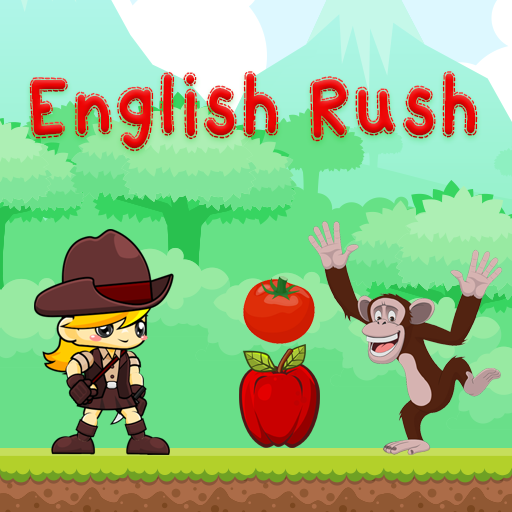
<style>
.page{position:relative;width:512px;height:512px}
.page>*{position:absolute;margin:0}
.t1{font:79px "KBAStitchInTime";color:#ed0404;scale:0.86 1}
</style>
<div class="page">
<p class="t1" style="left:29px;top:71px;width:449px;height:81px">English Rush</p>
</div>
